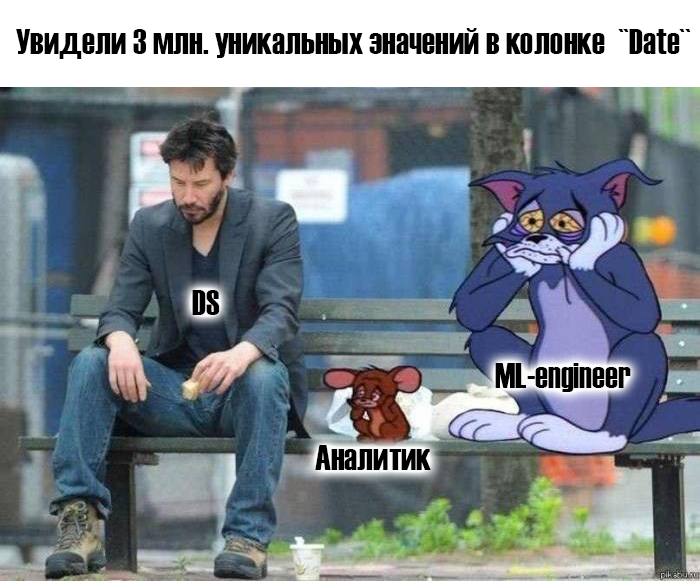
<style>
.page{position:relative;width:700px;height:581px}
.page>*{position:absolute;margin:0}
.t1{font:36px "Haettenschweiler";color:#000000}
</style>
<div class="page">
<p class="t1" style="left:16px;top:28px;width:675px;height:31px">Увидели 3 млн. уникальных значений в колонке  ``Date``</p>
<p class="t1" style="left:192px;top:290px;width:28px;height:25px">DS</p>
<p class="t1" style="left:495px;top:363px;width:136px;height:29px">ML-engineer</p>
<p class="t1" style="left:315px;top:445px;width:116px;height:25px">Аналитик</p>
</div>
